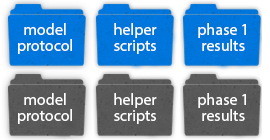
<style>
.page{position:relative;width:270px;height:140px}
.page>*{position:absolute;margin:0}
.t1{font:16px/16px "MyriadPro-Regular";color:#ffffff}
</style>
<div class="page">
<p class="t1" style="left:18px;top:23px;width:54px;height:31px;text-align:center">model protocolt</p>
<p class="t1" style="left:114px;top:23px;width:43px;height:31px;text-align:center">helper scripts</p>
<p class="t1" style="left:198px;top:23px;width:48px;height:28px;text-align:center">phase 1<br>results</p>
<p class="t1" style="left:18px;top:93px;width:54px;height:31px;text-align:center">model protocolt</p>
<p class="t1" style="left:114px;top:93px;width:43px;height:31px;text-align:center">helper scripts</p>
<p class="t1" style="left:198px;top:93px;width:48px;height:28px;text-align:center">phase 1<br>results</p>
</div>
